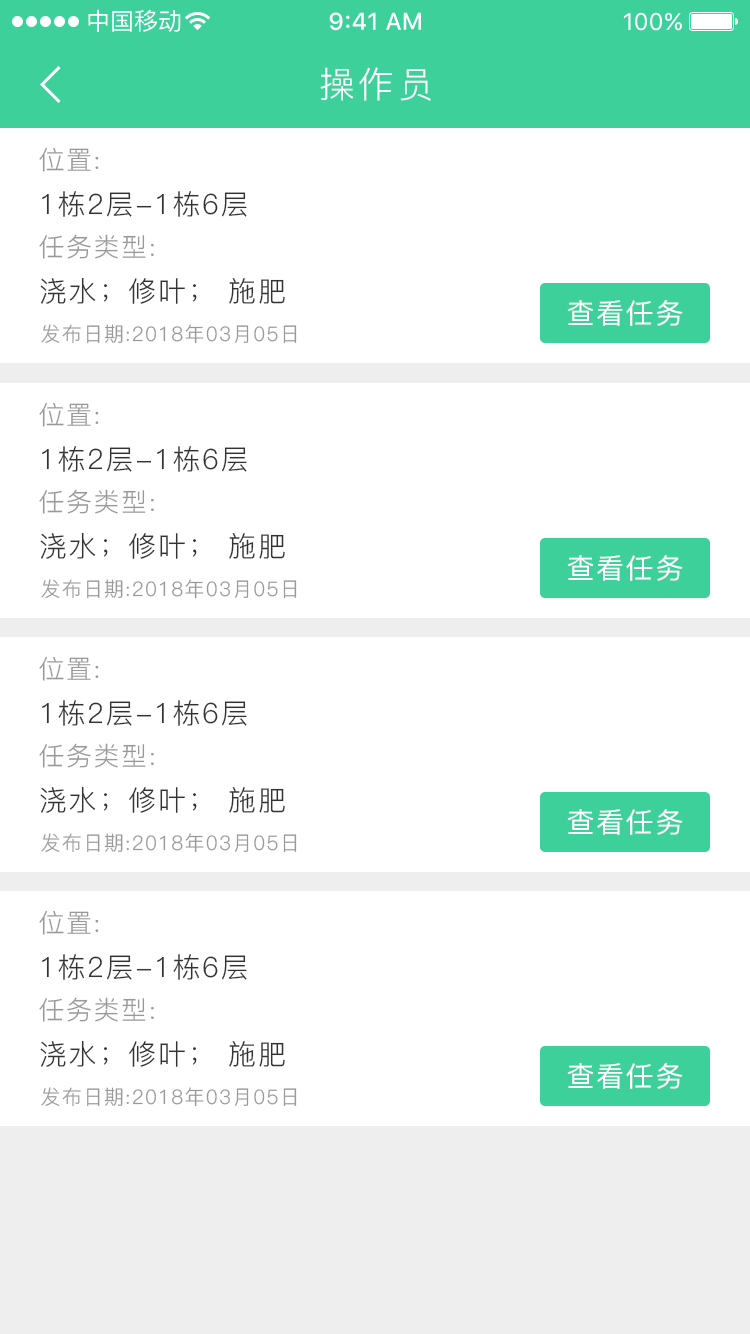
<style>
.page{position:relative;width:750px;height:1334px;background:#ffffff}
.page>*{position:absolute;margin:0}
.t1{font:36px "PingFang-SC-Regular";letter-spacing:0.1em;color:#ffffff}
.t2{font:26px "PingFang-SC-Regular";letter-spacing:0.06em;color:#999999}
.t3{font:28px "PingFang-SC-Regular";letter-spacing:0.06em;color:#333333}
.t4{font:28px "PingFang-SC-Medium";letter-spacing:0.06em;color:#ffffff}
.t5{font:20px "PingFang-SC-Regular";letter-spacing:0.06em;color:#999999}
</style>
<div class="page">
<p class="t1" style="left:320px;top:67px;width:111px;height:34px">操作员</p>
<p class="t2" style="left:39px;top:147px;width:60px;height:25px">位置:</p>
<p class="t3" style="left:42px;top:191px;width:205px;height:26px">1栋2层-1栋6层</p>
<p class="t2" style="left:39px;top:234px;width:115px;height:25px">任务类型:</p>
<p class="t3" style="left:40px;top:277px;width:245px;height:27px">浇水；修叶； 施肥</p>
<p class="t4" style="left:567px;top:300px;width:116px;height:26px">查看任务</p>
<p class="t5" style="left:41px;top:324px;width:256px;height:20px">发布日期:2018年03月05日</p>
<p class="t2" style="left:39px;top:402px;width:60px;height:25px">位置:</p>
<p class="t3" style="left:42px;top:446px;width:205px;height:26px">1栋2层-1栋6层</p>
<p class="t2" style="left:39px;top:489px;width:115px;height:25px">任务类型:</p>
<p class="t3" style="left:40px;top:532px;width:245px;height:27px">浇水；修叶； 施肥</p>
<p class="t4" style="left:567px;top:555px;width:116px;height:26px">查看任务</p>
<p class="t5" style="left:41px;top:579px;width:256px;height:20px">发布日期:2018年03月05日</p>
<p class="t2" style="left:39px;top:656px;width:60px;height:25px">位置:</p>
<p class="t3" style="left:42px;top:700px;width:205px;height:26px">1栋2层-1栋6层</p>
<p class="t2" style="left:39px;top:743px;width:115px;height:25px">任务类型:</p>
<p class="t3" style="left:40px;top:786px;width:245px;height:27px">浇水；修叶； 施肥</p>
<p class="t4" style="left:567px;top:809px;width:116px;height:26px">查看任务</p>
<p class="t5" style="left:41px;top:833px;width:256px;height:20px">发布日期:2018年03月05日</p>
<p class="t2" style="left:39px;top:910px;width:60px;height:25px">位置:</p>
<p class="t3" style="left:42px;top:954px;width:205px;height:26px">1栋2层-1栋6层</p>
<p class="t2" style="left:39px;top:997px;width:115px;height:25px">任务类型:</p>
<p class="t3" style="left:40px;top:1040px;width:245px;height:27px">浇水；修叶； 施肥</p>
<p class="t4" style="left:567px;top:1063px;width:116px;height:26px">查看任务</p>
<p class="t5" style="left:41px;top:1087px;width:256px;height:20px">发布日期:2018年03月05日</p>
</div>
